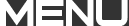
<style>
.page{position:relative;width:129px;height:26px;background:#ffffff}
.page>*{position:absolute;margin:0}
.t1{font:50px "Bitsumishi";color:#ffffff}
</style>
<div class="page">
<p class="t1" style="left:0px;top:0px;width:128px;height:26px">menu</p>
</div>
